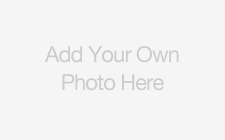
<style>
.page{position:relative;width:225px;height:140px;background:#f5f5f5}
.page>*{position:absolute;margin:0}
.t1{font:22px/28px "HelveticaNeue";letter-spacing:-0.04em;color:#cccccc}
</style>
<div class="page">
<p class="t1" style="left:44px;top:46px;width:135px;height:45px;text-align:center">Add Your Own <br>Photo Here</p>
</div>
